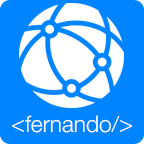
<style>
.page{position:relative;width:144px;height:144px;background:#0084ff}
.page>*{position:absolute;margin:0}
.t1{font:22.7px "HelveticaNeueLight";color:#ffffff}
</style>
<div class="page">
<p class="t1" style="left:12px;top:115px;width:120px;height:18px">&lt;fernando/&gt;</p>
</div>
